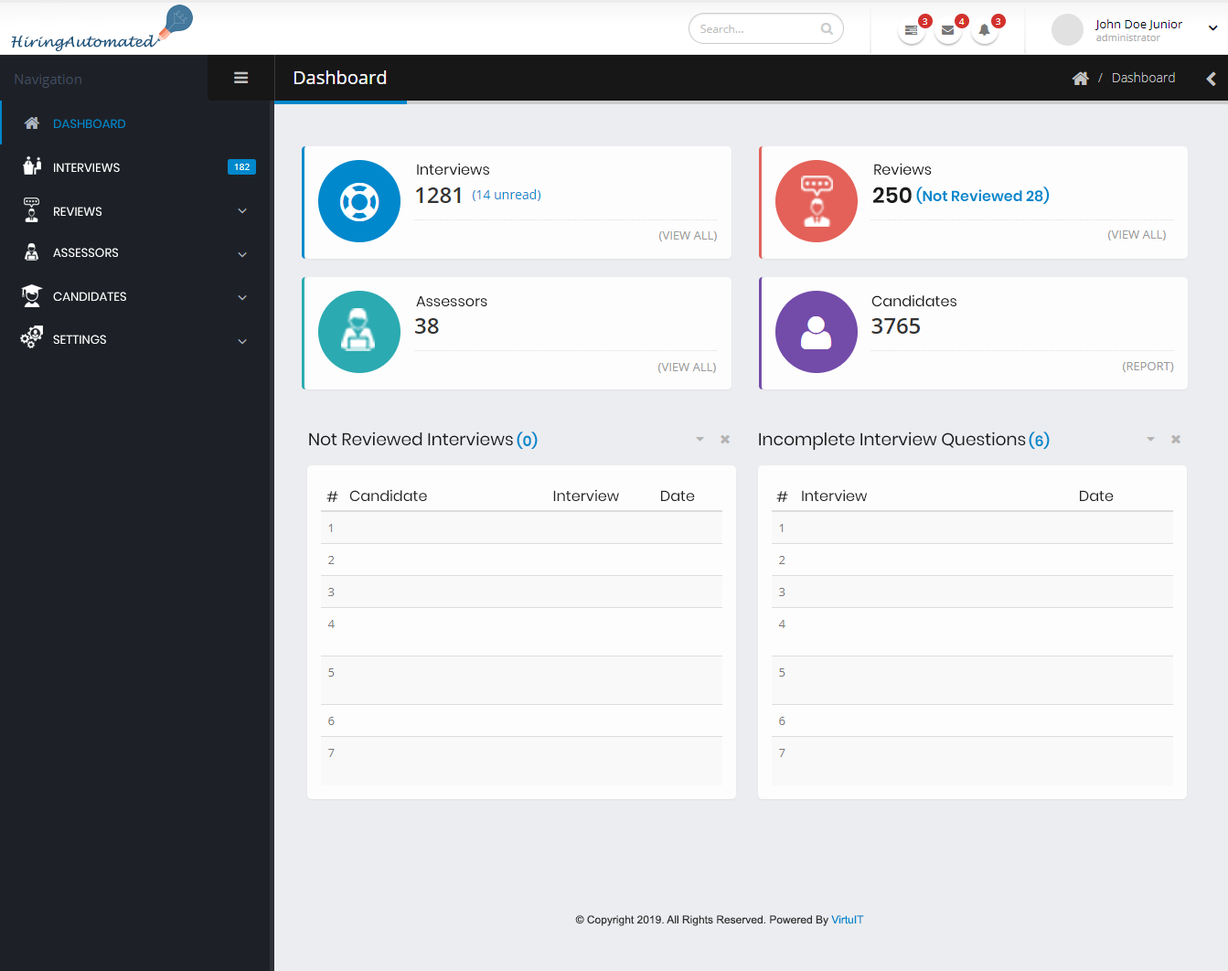
<style>
.page{position:relative;width:1228px;height:971px;background:#ecedf0}
.page>*{position:absolute;margin:0}
.t1{font:13.8px "LucidaHandwriting-Italic";color:#1f577f}
.t2{font:12.2px "Poppins-Regular";color:#0088cc}
.t3{font:12.2px "Poppins-Regular";color:#fdfdfd}
.t4{font:14.6px "Poppins-Regular";color:#1a1b1b}
.t5{font:21.9px "Poppins-SemiBold";color:#1a1b1b}
.t6{font:14.6px "Poppins-SemiBold";color:#0088cc}
.t7{font:17.1px "Poppins-Regular";color:#1a1b1b}
.t8{font:11px "Poppins-Regular";color:#282727}
.t9{font:11px "ArialMT";color:#333333}
.t10{font:11px "ArialMT";color:#0088cc}
</style>
<div class="page">
<p class="t1" style="left:11px;top:35px;width:146px;height:17px">HiringAutomated</p>
<p class="t2" style="left:54px;top:119px;width:71px;height:9px">DASHBOARD</p>
<p class="t3" style="left:54px;top:163px;width:66px;height:9px">INTERVIEWS</p>
<p class="t4" style="left:417px;top:163px;width:72px;height:12px">Interviews</p>
<p class="t4" style="left:874px;top:163px;width:58px;height:12px">Reviews</p>
<p class="t5" style="left:873px;top:187px;width:39px;height:16px">250</p>
<p class="t6" style="left:916px;top:187px;width:134px;height:17px">(Not Reviewed 28)</p>
<p class="t3" style="left:54px;top:207px;width:47px;height:9px">REVIEWS</p>
<p class="t3" style="left:53px;top:248px;width:65px;height:9px">ASSESSORS</p>
<p class="t3" style="left:53px;top:292px;width:73px;height:9px">CANDIDATES</p>
<p class="t4" style="left:416px;top:296px;width:71px;height:10px">Assessors</p>
<p class="t4" style="left:871px;top:294px;width:85px;height:12px">Candidates</p>
<p class="t3" style="left:53px;top:335px;width:53px;height:9px">SETTINGS</p>
<p class="t7" style="left:309px;top:432px;width:204px;height:14px">Not Reviewed Interviews</p>
<p class="t6" style="left:517px;top:432px;width:21px;height:17px">(0)</p>
<p class="t7" style="left:759px;top:432px;width:267px;height:18px">Incomplete Interview Questions</p>
<p class="t6" style="left:1029px;top:432px;width:21px;height:17px">(6)</p>
<p class="t8" style="left:326px;top:491px;width:12px;height:11px">#</p>
<p class="t8" style="left:349px;top:489px;width:346px;height:12px">Candidate                              Interview     Date</p>
<p class="t8" style="left:776px;top:491px;width:12px;height:11px">#</p>
<p class="t8" style="left:802px;top:489px;width:312px;height:12px">Interview                                              Date</p>
<p class="t9" style="left:575px;top:915px;width:289px;height:11px">© Copyright 2019. All Rights Reserved. Powered By <span class="t10">VirtuIT</span></p>
</div>
